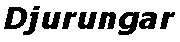
<style>
.page{position:relative;width:180px;height:42px;background:#ffffff}
.page>*{position:absolute;margin:0}
.t1{font:30px "Verdana-BoldItalic";color:#000000}
</style>
<div class="page">
<p class="t1" style="left:4px;top:6px;width:171px;height:29px">Djurungar</p>
</div>
